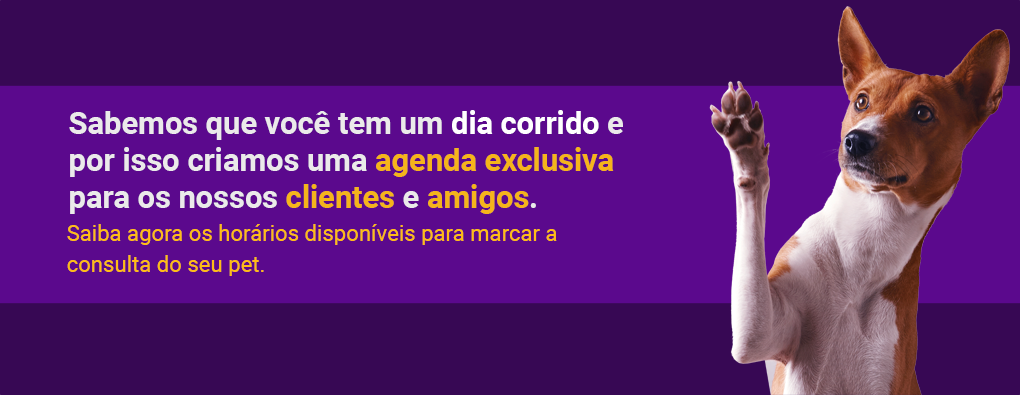
<style>
.page{position:relative;width:1020px;height:395px;background:#370854}
.page>*{position:absolute;margin:0}
.t1{font:30.8px "Roboto-Bold";color:#ebeaea}
.t2{font:30.8px "Roboto-Bold";color:#ffffff}
.t3{font:30.8px "Roboto-Bold";color:#f5b41b}
.t4{font:22.2px/30.8px "Roboto-Regular";color:#ffbc15}
</style>
<div class="page">
<p class="t1" style="left:69px;top:110px;width:554px;height:104px">Sabemos que você tem um <span class="t2">dia corrido</span> e<br>por isso criamos uma <span class="t3">agenda exclusiva</span> <br>para os nossos <span class="t3">clientes</span> e <span class="t3">amigos</span>.</p>
<p class="t4" style="left:67px;top:224px;width:490px;height:52px">Saiba agora os horários disponíveis para marcar a<br>consulta do seu pet.</p>
</div>
